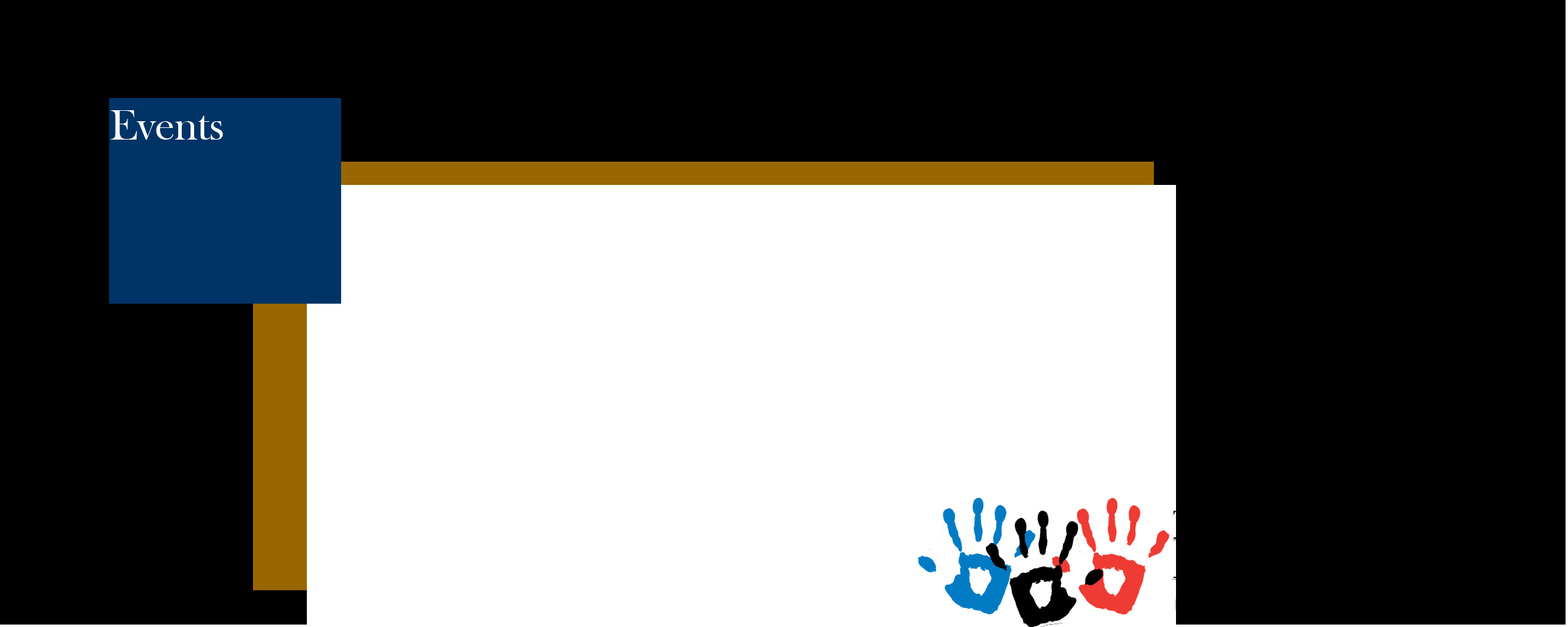
<style>
.page{position:relative;width:1568px;height:627px;background:#000000}
.page>*{position:absolute;margin:0}
.t1{font:44.1px "BaskOldFace";color:#ffffff}
</style>
<div class="page">
<p class="t1" style="left:110px;top:110px;width:113px;height:30px">Events</p>
</div>
